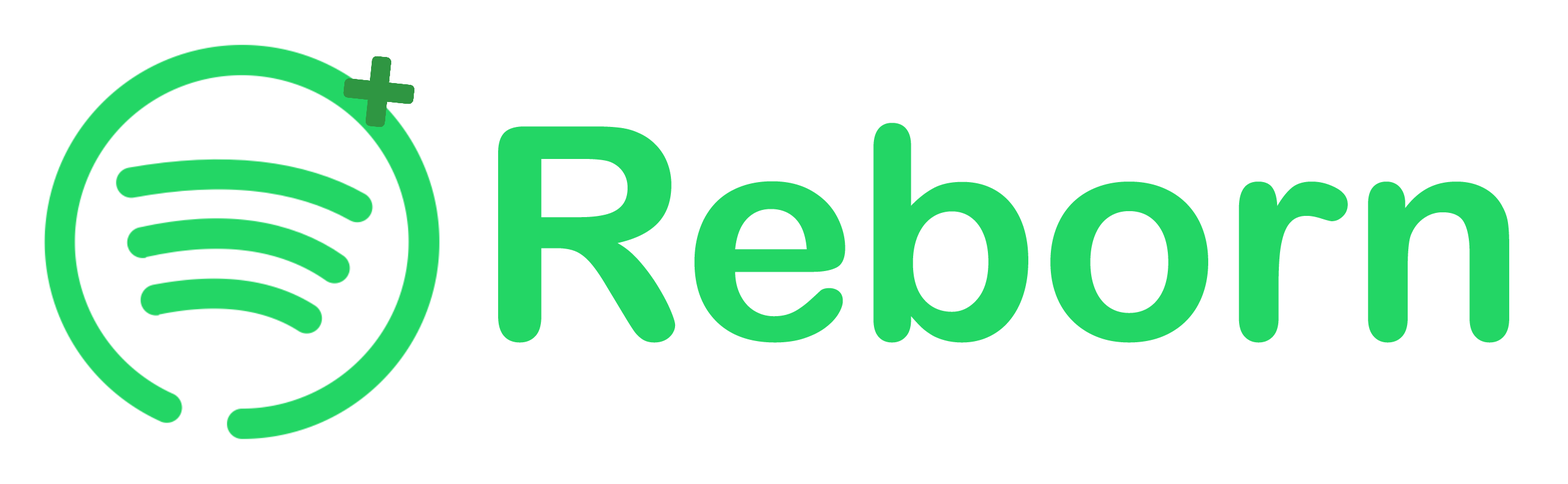
<style>
.page{position:relative;width:1568px;height:484px;background:#ffffff}
.page>*{position:absolute;margin:0}
.t1{font:296.9px "ArialRoundedMTBold";color:#23d665}
</style>
<div class="page">
<p class="t1" style="left:498px;top:123px;width:1011px;height:220px">Reborn</p>
</div>
